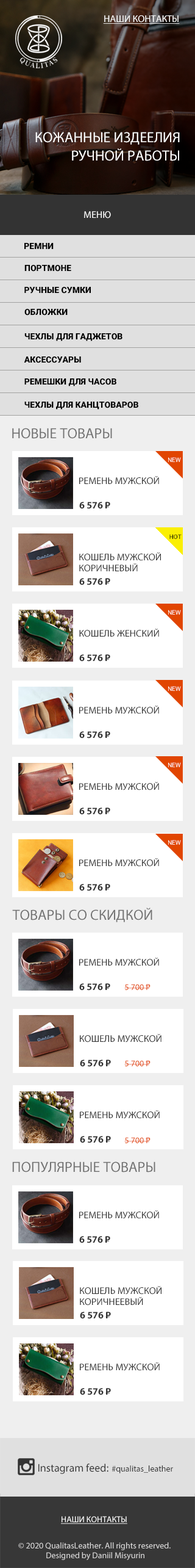
<style>
.page{position:relative;width:195px;height:1568px;background:#ffffff}
.page>*{position:absolute;margin:0}
.t1{font:9.8px "MyriadPro-Regular";color:#ffffff;text-transform:uppercase;text-decoration:underline}
.t2{font:14.6px/18.3px "MyriadPro-Regular";color:#ffffff;text-transform:uppercase}
.t3{font:9.8px "MyriadPro-Regular";color:#ffffff;text-transform:uppercase}
.t4{font:8.5px "Roboto-Black";color:#000000;text-transform:uppercase}
.t5{font:14.6px "MyriadPro-Regular";color:#707070;text-transform:uppercase}
.t6{font:6.1px "Roboto-Regular";color:#ffffff;text-transform:uppercase}
.t7{font:9.8px "MyriadPro-Regular";color:#333333;text-transform:uppercase}
.t8{font:9.8px "MyriadPro-Bold";color:#333333;text-transform:uppercase}
.t9{font:9.8px "MyriadPro-Bold";color:#333333;text-transform:uppercase;scale:0.8 1}
.t10{font:6.1px "Roboto-Regular";color:#000000;text-transform:uppercase}
.t11{font:9.8px/11px "MyriadPro-Regular";color:#333333;text-transform:uppercase}
.t12{font:8.5px "MyriadPro-Regular";color:#e24602;text-transform:uppercase}
.t13{font:8.5px "MyriadPro-Regular";color:#e24602;text-transform:uppercase;scale:0.8 1}
.t14{font:8.5px "MyriadPro-Regular";color:#333333}
.t15{font:14.6px "MyriadPro-Regular";color:#333333}
.t16{font:11px "MyriadPro-Regular";color:#333333}
.t17{font:8.5px "MyriadPro-Regular";color:#ffffff;text-transform:uppercase;text-decoration:underline}
.t18{font:8.5px/9.8px "MyriadPro-Regular";color:#dad9d9}
</style>
<div class="page">
<p class="t1" style="left:103px;top:15px;width:77px;height:9px">НАШИ КОНТАКТЫ</p>
<p class="t2" style="left:35px;top:132px;width:145px;height:29px;text-align:right">Кожанные издеелия<br>ручной работы</p>
<p class="t3" style="left:84px;top:211px;width:27px;height:8px">Меню</p>
<p class="t4" style="left:24px;top:243px;width:30px;height:6px">РЕМНИ</p>
<p class="t4" style="left:24px;top:265px;width:47px;height:7px">ПОРТМОНЕ</p>
<p class="t4" style="left:24px;top:287px;width:67px;height:7px">РУЧНЫЕ СУМКИ</p>
<p class="t4" style="left:24px;top:309px;width:44px;height:7px">ОБЛОЖКИ</p>
<p class="t4" style="left:24px;top:333px;width:99px;height:8px">ЧЕХЛЫ ДЛЯ ГАДЖЕТОВ</p>
<p class="t4" style="left:24px;top:356px;width:57px;height:7px">АКСЕСсУАРЫ</p>
<p class="t4" style="left:24px;top:378px;width:93px;height:8px">РЕМЕШКИ ДЛЯ ЧАСОВ</p>
<p class="t4" style="left:24px;top:402px;width:115px;height:8px">ЧЕХЛЫ ДЛЯ КАНЦТОВАРОВ</p>
<p class="t5" style="left:12px;top:428px;width:100px;height:11px">НОВЫЕ ТОВАРЫ</p>
<p class="t6" style="left:168px;top:457px;width:13px;height:5px">NEW</p>
<p class="t7" style="left:79px;top:476px;width:80px;height:9px">Ремень мужской</p>
<p class="t8" style="left:79px;top:502px;width:31px;height:7px">6 576 Р<span class="t9">_</span></p>
<p class="t10" style="left:170px;top:534px;width:12px;height:5px">HOT</p>
<p class="t11" style="left:79px;top:552px;width:82px;height:20px">кошель мужской <br>коричневый</p>
<p class="t8" style="left:79px;top:578px;width:31px;height:7px">6 576 Р<span class="t9">_</span></p>
<p class="t6" style="left:168px;top:610px;width:13px;height:5px">NEW</p>
<p class="t7" style="left:79px;top:629px;width:80px;height:8px">КОШЕЛЬ ЖЕНСКИЙ</p>
<p class="t8" style="left:79px;top:654px;width:31px;height:8px">6 576 Р<span class="t9">_</span></p>
<p class="t6" style="left:168px;top:686px;width:13px;height:5px">NEW</p>
<p class="t7" style="left:79px;top:706px;width:80px;height:8px">Ремень мужской</p>
<p class="t8" style="left:79px;top:731px;width:31px;height:8px">6 576 Р<span class="t9">_</span></p>
<p class="t6" style="left:168px;top:762px;width:13px;height:5px">NEW</p>
<p class="t7" style="left:79px;top:782px;width:80px;height:8px">Ремень мужской</p>
<p class="t8" style="left:79px;top:807px;width:31px;height:8px">6 576 Р<span class="t9">_</span></p>
<p class="t6" style="left:168px;top:840px;width:13px;height:5px">NEW</p>
<p class="t7" style="left:79px;top:858px;width:80px;height:9px">Ремень мужской</p>
<p class="t8" style="left:79px;top:884px;width:31px;height:7px">6 576 Р<span class="t9">_</span></p>
<p class="t5" style="left:12px;top:908px;width:141px;height:14px">ТОВАРЫ СО СКИДКОЙ</p>
<p class="t7" style="left:79px;top:958px;width:80px;height:8px">Ремень мужской</p>
<p class="t8" style="left:79px;top:983px;width:31px;height:8px">6 576 Р<span class="t9">_</span></p>
<p class="t12" style="left:125px;top:984px;width:26px;height:6px">5 700 Р<span class="t13">_</span></p>
<p class="t7" style="left:80px;top:1034px;width:82px;height:8px">кошель мужской</p>
<p class="t8" style="left:80px;top:1060px;width:31px;height:7px">6 576 Р<span class="t9">_</span></p>
<p class="t12" style="left:125px;top:1060px;width:26px;height:6px">5 700 Р<span class="t13">_</span></p>
<p class="t7" style="left:80px;top:1110px;width:80px;height:9px">Ремень мужской</p>
<p class="t8" style="left:80px;top:1136px;width:31px;height:7px">6 576 Р<span class="t9">_</span></p>
<p class="t12" style="left:125px;top:1137px;width:26px;height:6px">5 700 Р<span class="t13">_</span></p>
<p class="t5" style="left:12px;top:1162px;width:144px;height:10px">ПОпулярные товары</p>
<p class="t7" style="left:79px;top:1210px;width:80px;height:9px">Ремень мужской</p>
<p class="t8" style="left:79px;top:1236px;width:31px;height:7px">6 576 Р<span class="t9">_</span></p>
<p class="t11" style="left:80px;top:1286px;width:82px;height:20px">кошель мужской <br>коричнеевый</p>
<p class="t8" style="left:80px;top:1312px;width:31px;height:7px">6 576 Р<span class="t9">_</span></p>
<p class="t7" style="left:80px;top:1362px;width:80px;height:9px">Ремень мужской</p>
<p class="t8" style="left:80px;top:1388px;width:31px;height:7px">6 576 Р<span class="t9">_</span></p>
<p class="t14" style="left:38px;top:1464px;width:135px;height:10px"><span class="t15"><br></span><span class="t16">Instagram feed: </span>#qualitas_leather</p>
<p class="t17" style="left:61px;top:1516px;width:67px;height:8px">Наши контакты</p>
<p class="t18" style="left:18px;top:1542px;width:153px;height:18px;text-align:center">© 2020 QualitasLeather. All rights reserved. <br>Designed by Daniil Misyurin</p>
</div>
